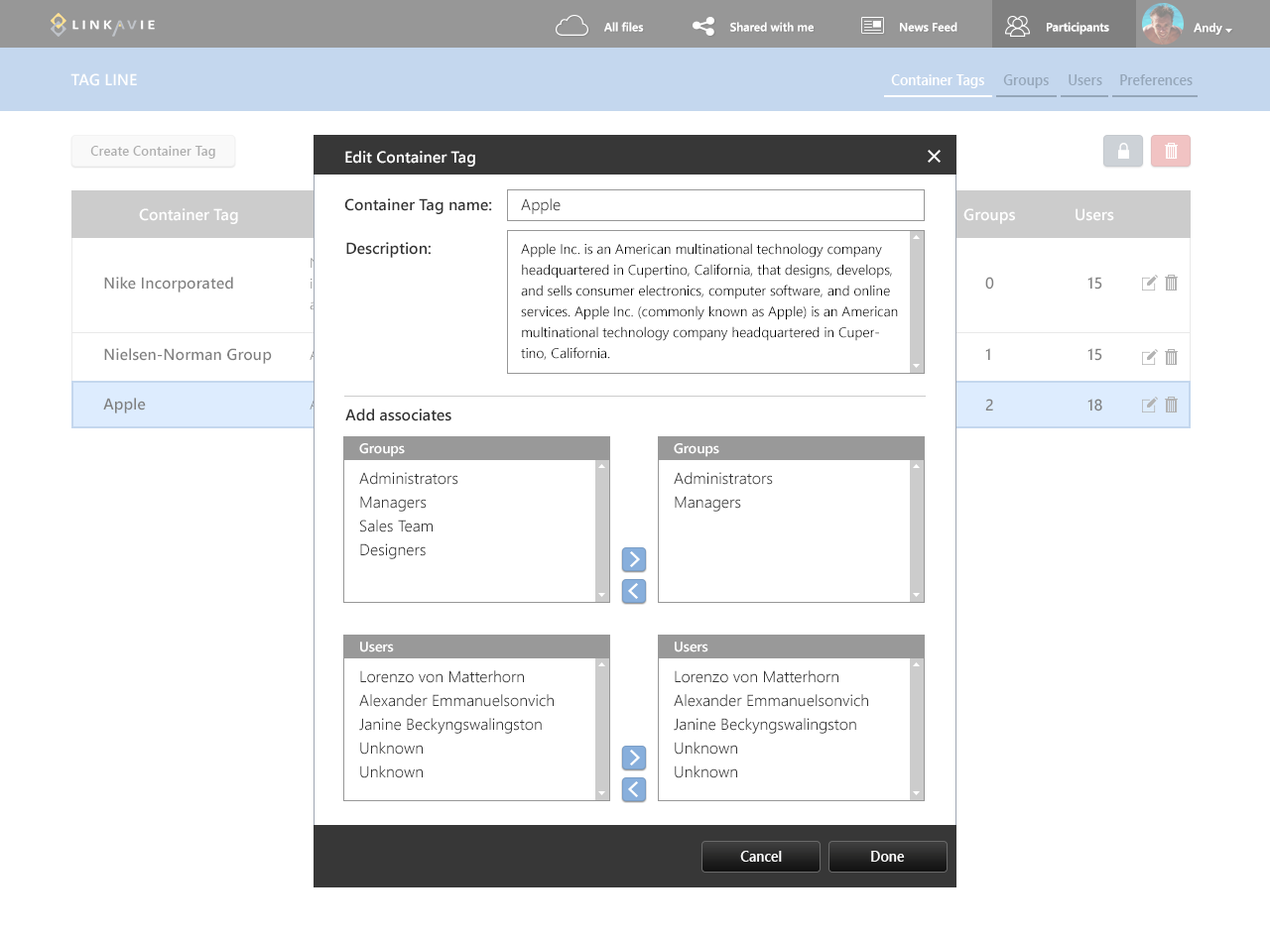
<style>
.page{position:relative;width:1270px;height:939px;background:#ffffff}
.page>*{position:absolute;margin:0}
.t1{font:11.9px "WeblySleekUISemibold";color:#ffffff}
.t2{font:15.9px "WeblySleekUISemibold";color:#ffffff;text-transform:uppercase}
.t3{font:14.6px "WeblySleekUISemibold";color:#ffffff;scale:0.95 1}
.t4{font:14.6px "WeblySleekUISemibold";color:#95a6b9;scale:0.95 1}
.t5{font:13.9px "WeblySleekUISemibold";color:#aeaeae;scale:0.95 1}
.t6{font:15.9px "WeblySleekUISemibold";color:#ffffff}
.t7{font:15.9px "WeblySleekUISemibold";color:#333333}
.t8{font:15.9px "WeblySleekUISemilight";color:#333333}
.t9{font:13.9px/20.8px "WeblySleekUISemilight";color:#000000}
.t10{font:15.9px "WeblySleekUISemibold";color:#808080}
.t11{font:13.9px "WeblySleekUISemibold";color:#ffffff}
.t12{font:15.9px/23.8px "WeblySleekUISemilight";color:#333333}
</style>
<div class="page">
<p class="t1" style="left:604px;top:22px;width:40px;height:10px">All files</p>
<p class="t1" style="left:730px;top:22px;width:83px;height:10px">Shared with me</p>
<p class="t1" style="left:900px;top:22px;width:57px;height:10px">News Feed</p>
<p class="t1" style="left:1046px;top:22px;width:63px;height:13px">Participants</p>
<p class="t1" style="left:1193px;top:23px;width:29px;height:12px">Andy</p>
<p class="t2" style="left:70px;top:73px;width:67px;height:13px">Tag line</p>
<p class="t3" style="left:891px;top:74px;width:93px;height:14px">Container Tags</p>
<p class="t4" style="left:1003px;top:74px;width:45px;height:14px">Groups</p>
<p class="t4" style="left:1068px;top:74px;width:34px;height:11px">Users</p>
<p class="t4" style="left:1120px;top:74px;width:72px;height:11px">Preferences</p>
<p class="t5" style="left:90px;top:146px;width:125px;height:13px">Create Container Tag</p>
<p class="t6" style="left:345px;top:151px;width:130px;height:16px">Edit Container Tag</p>
<p class="t6" style="left:139px;top:208px;width:99px;height:16px">Container Tag</p>
<p class="t7" style="left:344px;top:198px;width:148px;height:16px">Container Tag name:</p>
<p class="t8" style="left:521px;top:198px;width:39px;height:16px">Apple</p>
<p class="t6" style="left:963px;top:208px;width:52px;height:16px">Groups</p>
<p class="t6" style="left:1075px;top:208px;width:39px;height:13px">Users</p>
<p class="t7" style="left:346px;top:242px;width:84px;height:16px">Description:</p>
<p class="t9" style="left:521px;top:243px;width:377px;height:117px">Apple Inc. is an American multinational technology company headquartered in Cupertino, California, that designs, develops, and sells consumer electronics, computer software, and online services. Apple Inc. (commonly known as Apple) is an American multinational technology company headquartered in Cupertino, California.</p>
<p class="t10" style="left:104px;top:277px;width:129px;height:16px">Nike Incorporated</p>
<p class="t10" style="left:985px;top:277px;width:9px;height:13px">0</p>
<p class="t10" style="left:1087px;top:277px;width:15px;height:13px">15</p>
<p class="t10" style="left:104px;top:348px;width:168px;height:16px">Nielsen-Norman Group</p>
<p class="t10" style="left:985px;top:348px;width:5px;height:12px">1</p>
<p class="t10" style="left:1087px;top:348px;width:15px;height:13px">15</p>
<p class="t10" style="left:103px;top:398px;width:43px;height:16px">Apple</p>
<p class="t10" style="left:985px;top:399px;width:8px;height:12px">2</p>
<p class="t10" style="left:1087px;top:399px;width:15px;height:13px">18</p>
<p class="t7" style="left:345px;top:409px;width:106px;height:13px">Add associates</p>
<p class="t11" style="left:359px;top:443px;width:46px;height:14px">Groups</p>
<p class="t11" style="left:673px;top:443px;width:46px;height:14px">Groups</p>
<p class="t12" style="left:359px;top:472px;width:99px;height:87px">Administrators<br>Managers<br>Sales Team<br>Designers</p>
<p class="t12" style="left:673px;top:472px;width:100px;height:40px">Administrators<br>Managers</p>
<p class="t11" style="left:360px;top:642px;width:34px;height:11px">Users</p>
<p class="t11" style="left:674px;top:642px;width:34px;height:11px">Users</p>
<p class="t12" style="left:359px;top:670px;width:194px;height:109px">Lorenzo von Matterhorn<br>Alexander Emmanuelsonvich<br>Janine Beckyngswalingston<br>Unknown<br>Unknown</p>
<p class="t12" style="left:673px;top:670px;width:195px;height:109px">Lorenzo von Matterhorn<br>Alexander Emmanuelsonvich<br>Janine Beckyngswalingston<br>Unknown<br>Unknown</p>
<p class="t3" style="left:740px;top:851px;width:42px;height:11px">Cancel</p>
<p class="t3" style="left:871px;top:851px;width:34px;height:11px">Done</p>
</div>
